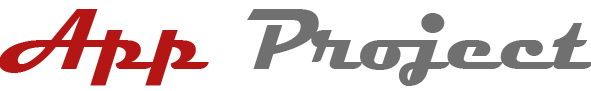
<style>
.page{position:relative;width:591px;height:91px;background:#ffffff}
.page>*{position:absolute;margin:0}
.t1{font:87px "Magneto-Bold";color:#707070}
.t2{font:87px "Magneto-Bold";color:#b41616}
</style>
<div class="page">
<p class="t1" style="left:0px;top:9px;width:593px;height:77px"><span class="t2">App </span>Project</p>
</div>
